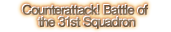
<style>
.page{position:relative;width:171px;height:32px;background:#ffffff}
.page>*{position:absolute;margin:0}
.t1{font:13px/12px "FutoGoB101Pr5-Bold";letter-spacing:-0.08em;font-weight:bold}
.t2{font:13px/12px "FutoGoB101Pr5-Bold";letter-spacing:-0.08em;color:#7f6951;font-weight:bold}
</style>
<div class="page">
<p class="t1" style="left:21px;top:3px;width:126px;height:25px;text-align:center">Counterattack! Battle of <br>the 31st Squadron</p>
<p class="t2" style="left:22px;top:4px;width:126px;height:25px;text-align:center">Counterattack! Battle of <br>the 31st Squadron</p>
</div>
